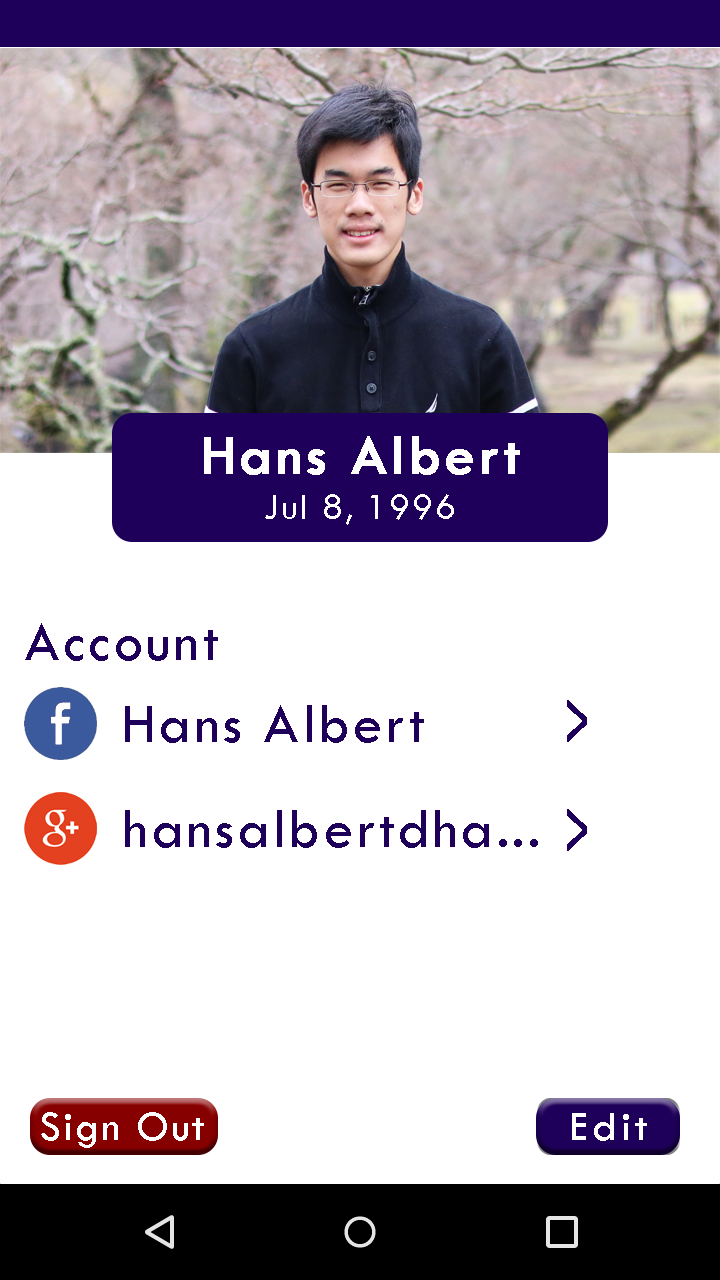
<style>
.page{position:relative;width:720px;height:1280px;background:#ffffff}
.page>*{position:absolute;margin:0}
.t1{font:58.3px/45.8px "TwCenMT-Regular";letter-spacing:0.05em;color:#ffffff;font-weight:bold}
.t2{font:37.5px/45.8px "TwCenMT-Regular";letter-spacing:0.05em;color:#ffffff}
.t3{font:58.3px "TwCenMT-Regular";letter-spacing:0.05em;color:#1e005a}
.t4{font:80.7px "TwCenMT-Regular";letter-spacing:0.05em;color:#1e005a;font-weight:bold;scale:0.43 1}
.t5{font:43.2px "TwCenMT-Regular";letter-spacing:0.05em;color:#ffffff}
.t6{font:43.2px "TwCenMT-Regular";letter-spacing:0.1em;color:#ffffff}
</style>
<div class="page">
<p class="t1" style="left:204px;top:436px;width:316px;height:89px;text-align:center">Hans Albert<br><span class="t2">Jul 8, 1996</span></p>
<p class="t3" style="left:25px;top:623px;width:193px;height:38px">Account</p>
<p class="t4" style="left:567px;top:700px;width:20px;height:42px">&gt;</p>
<p class="t3" style="left:125px;top:705px;width:299px;height:38px">Hans Albert</p>
<p class="t4" style="left:567px;top:809px;width:20px;height:42px">&gt;</p>
<p class="t3" style="left:125px;top:810px;width:413px;height:38px">hansalbertdha...</p>
<p class="t5" style="left:41px;top:1112px;width:163px;height:36px">Sign Out</p>
<p class="t6" style="left:572px;top:1113px;width:75px;height:28px">Edit</p>
</div>
